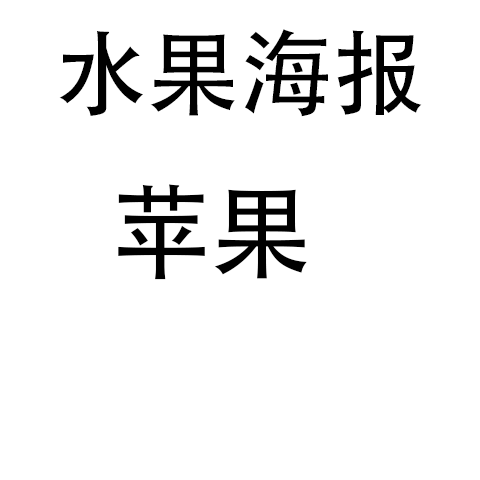
<style>
.page{position:relative;width:480px;height:480px;background:#ffffff}
.page>*{position:absolute;margin:0}
.t1{font:92.7px "AdobeHeitiStd-Regular";color:#000000}
.t2{font:101.2px "AdobeHeitiStd-Regular";color:#000000}
</style>
<div class="page">
<p class="t1" style="left:59px;top:29px;width:363px;height:88px">水果海报</p>
<p class="t2" style="left:118px;top:184px;width:189px;height:96px">苹果</p>
</div>
